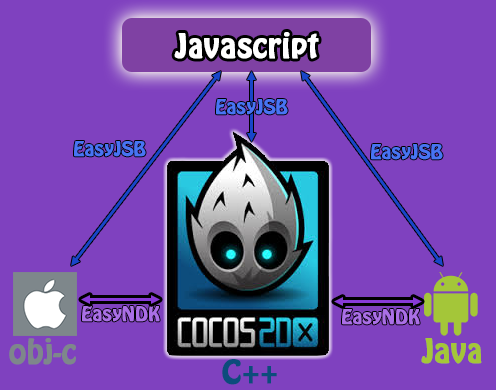
<style>
.page{position:relative;width:496px;height:390px;background:#7f41bf}
.page>*{position:absolute;margin:0}
.t1{font:30px "HoboStd";color:#ffffff;font-weight:bold}
.t2{font:18px "HoboStd";color:#4874f3;font-weight:bold}
.t3{font:18px "HoboStd";color:#aa6fe6;font-weight:bold}
.t4{font:30px "HoboStd";color:#7e878b;font-weight:bold}
.t5{font:30px "HoboStd";color:#a4c639;font-weight:bold}
.t6{font:30px "HoboStd";color:#0c4c7c;font-weight:bold}
</style>
<div class="page">
<p class="t1" style="left:174px;top:32px;width:145px;height:27px">Javascript</p>
<p class="t2" style="left:216px;top:99px;width:72px;height:16px">EasyJSB</p>
<p class="t2" style="left:74px;top:141px;width:72px;height:16px">EasyJSB</p>
<p class="t2" style="left:371px;top:144px;width:72px;height:16px">EasyJSB</p>
<p class="t3" style="left:82px;top:306px;width:78px;height:16px">EasyNDK</p>
<p class="t3" style="left:342px;top:309px;width:78px;height:16px">EasyNDK</p>
<p class="t4" style="left:9px;top:338px;width:67px;height:27px">obj-c</p>
<p class="t5" style="left:421px;top:338px;width:61px;height:26px">Java</p>
<p class="t6" style="left:222px;top:359px;width:55px;height:26px">C++</p>
</div>
